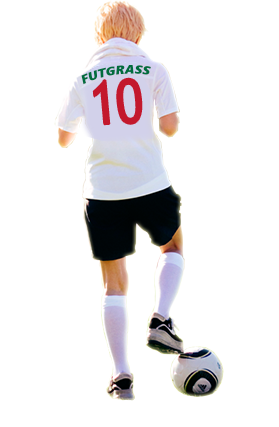
<style>
.page{position:relative;width:279px;height:427px;background:#ffffff}
.page>*{position:absolute;margin:0}
.t1{font:12.1px "SegoeUIBlack-Italic";color:#006c3d}
.t2{font:61.1px "TrebuchetMS";color:#c3182d;scale:0.83 1}
</style>
<div class="page">
<p class="t1" style="left:81px;top:65px;width:70px;height:20px;rotate:-8deg">FUTGRASS</p>
<p class="t2" style="left:93px;top:78px;width:49px;height:47px;rotate:-4deg">10</p>
</div>
